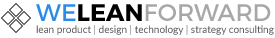
<style>
.page{position:relative;width:275px;height:38px;background:#ffffff}
.page>*{position:absolute;margin:0}
.t1{font:10px "Lato-Regular";color:#595959}
.t2{font:24px "Montserrat-Regular";color:#2b8be9}
.t3{font:24px "Montserrat-Bold";color:#000000}
.t4{font:24px "Montserrat-Regular";color:#a7a7a7}
</style>
<div class="page">
<p class="t1" style="left:36px;top:4px;width:238px;height:31px"><span class="t2">WE</span><span class="t3">LEAN</span><span class="t4">FORWARD<br></span>lean product | design | technology | strategy consulting</p>
</div>
